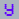
<style>
.page{position:relative;width:19px;height:19px;background:#abb4be}
.page>*{position:absolute;margin:0}
.t1{font:18px "SynchroLET";letter-spacing:0.025em;color:#6400fb}
</style>
<div class="page">
<p class="t1" style="left:4px;top:4px;width:10px;height:12px">y</p>
</div>
